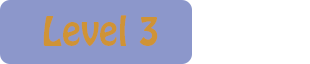
<style>
.page{position:relative;width:310px;height:64px;background:#8c97cb}
.page>*{position:absolute;margin:0}
.t1{font:36px "HoboStd";color:#cf9336}
</style>
<div class="page">
<p class="t1" style="left:43px;top:15px;width:115px;height:31px">Level 3</p>
</div>
